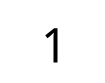
<style>
.page{position:relative;width:105px;height:83px;background:#ffffff}
.page>*{position:absolute;margin:0}
.t1{font:47.9px "DroidSans";color:#000000}
</style>
<div class="page">
<p class="t1" style="left:45px;top:28px;width:13px;height:35px">1</p>
</div>
